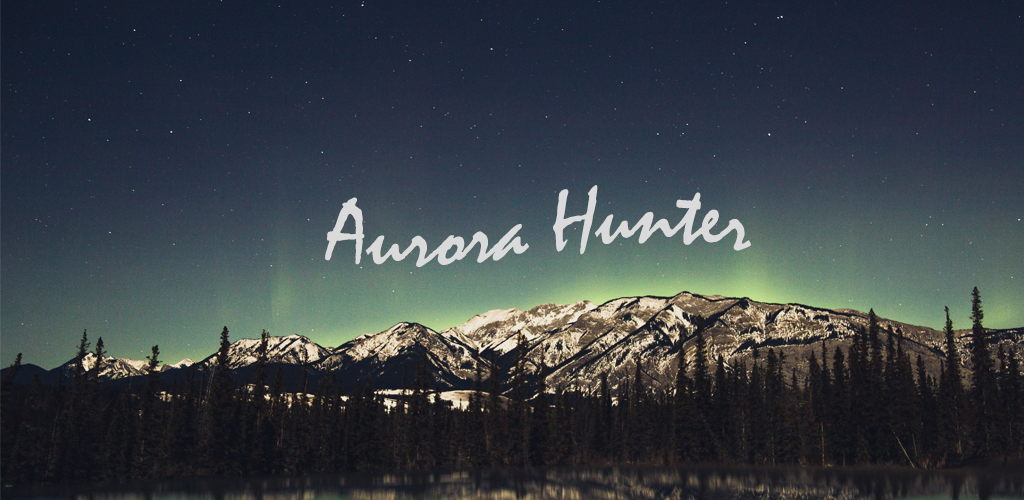
<style>
.page{position:relative;width:1024px;height:500px}
.page>*{position:absolute;margin:0}
.t1{font:90px "Mistral";color:#dadada}
</style>
<div class="page">
<p class="t1" style="left:325px;top:185px;width:426px;height:82px">Aurora Hunter</p>
</div>
